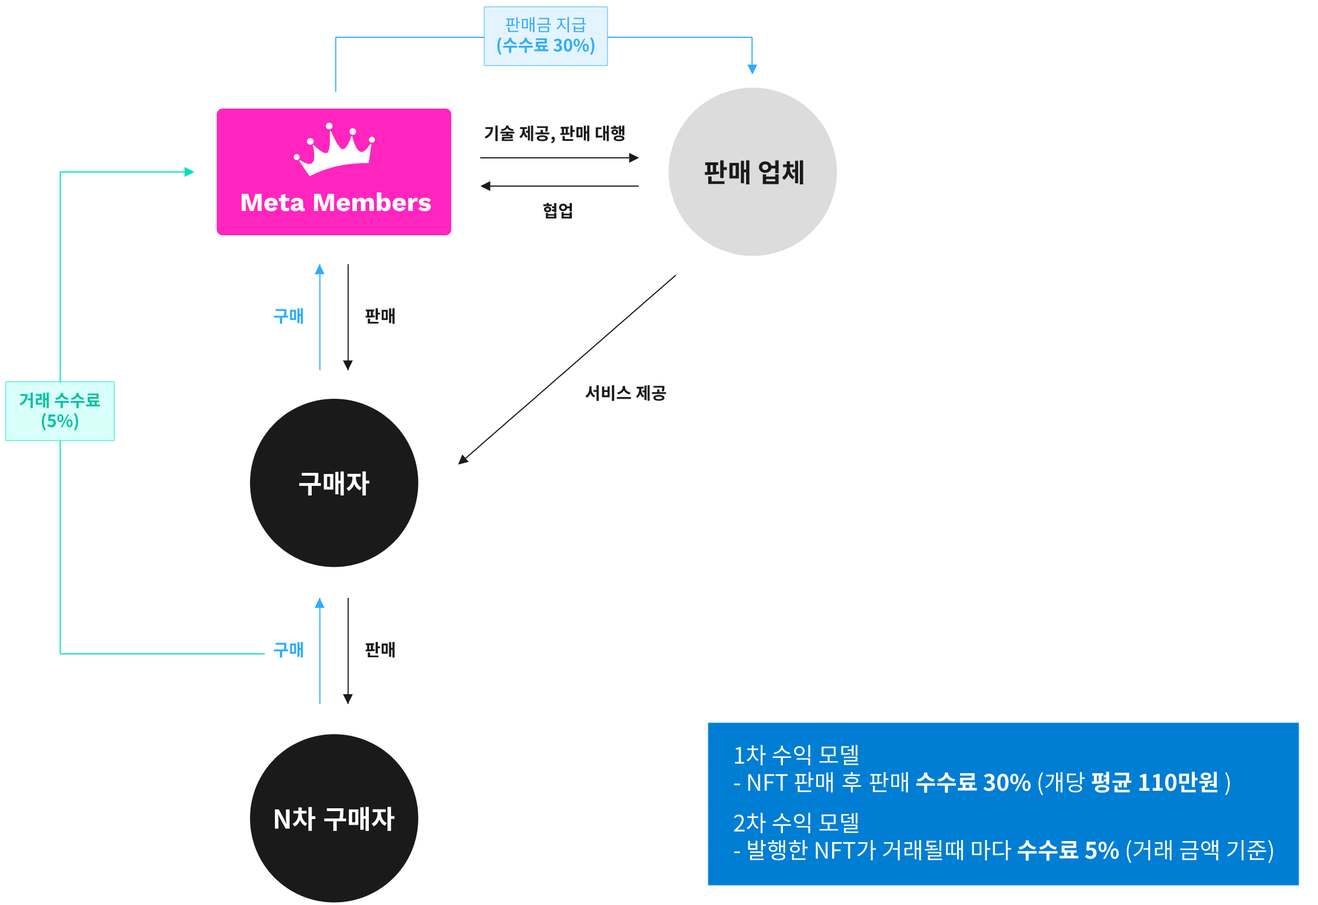
<style>
.page{position:relative;width:1318px;height:905px;background:#ffffff}
.page>*{position:absolute;margin:0}
.t1{font:17px "NotoSansKR-Bold";color:#2fabff}
.t2{font:17px "NotoSansKR-Regular";color:#2fabff}
.t3{font:17px "NotoSansKR-Bold";color:#1a1a1a}
.t4{font:26px "NotoSansKR-Bold";color:#1a1a1a}
.t5{font:26px "WorkSans-Bold";color:#ffffff}
.t6{font:17px "NotoSansKR-Bold";color:#07c1a3}
.t7{font:26px "NotoSansKR-Bold";color:#ffffff}
.t8{font:22.6px "NotoSansKR-Regular";color:#ffffff}
.t9{font:22.6px "NotoSansKR-Bold";color:#ffffff}
</style>
<div class="page">
<p class="t1" style="left:497px;top:17px;width:97px;height:38px;text-align:center"><span class="t2">판매금 지급<br></span>(수수료 30%)</p>
<p class="t3" style="left:484px;top:125px;width:140px;height:19px">기술 제공, 판매 대행</p>
<p class="t4" style="left:704px;top:160px;width:99px;height:24px">판매 업체</p>
<p class="t5" style="left:241px;top:192px;width:190px;height:20px">Meta Members</p>
<p class="t3" style="left:543px;top:202px;width:29px;height:17px">협업</p>
<p class="t1" style="left:274px;top:308px;width:29px;height:16px">구매</p>
<p class="t3" style="left:365px;top:308px;width:30px;height:16px">판매</p>
<p class="t3" style="left:585px;top:385px;width:81px;height:16px">서비스 제공</p>
<p class="t6" style="left:19px;top:392px;width:82px;height:39px;text-align:center">거래 수수료<br>(5%)</p>
<p class="t7" style="left:299px;top:471px;width:70px;height:24px">구매자</p>
<p class="t1" style="left:274px;top:641px;width:29px;height:17px">구매</p>
<p class="t3" style="left:365px;top:641px;width:30px;height:17px">판매</p>
<p class="t8" style="left:734px;top:745px;width:496px;height:50px">1차 수익 모델<br>- NFT 판매 후 판매 <span class="t9">수수료 30% </span>(개당 <span class="t9">평균 110만원 </span>)</p>
<p class="t7" style="left:274px;top:806px;width:121px;height:25px">N차 구매자</p>
<p class="t8" style="left:734px;top:813px;width:539px;height:50px">2차 수익 모델<br>- 발행한 NFT가 거래될때 마다 <span class="t9">수수료 5% </span>(거래 금액 기준)</p>
</div>
